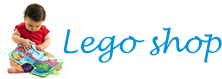
<style>
.page{position:relative;width:222px;height:79px;background:#ffffff}
.page>*{position:absolute;margin:0}
.t1{font:30px "LucidaHandwriting-Italic";color:#0096db}
</style>
<div class="page">
<p class="t1" style="left:63px;top:27px;width:159px;height:36px">Lego shop</p>
</div>
